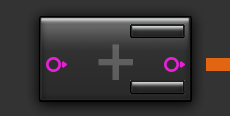
<style>
.page{position:relative;width:230px;height:116px;background:#333333}
.page>*{position:absolute;margin:0}
.t1{font:67px "MyriadPro-Bold";color:#5f5f5f}
</style>
<div class="page">
<p class="t1" style="left:98px;top:44px;width:35px;height:36px">+</p>
</div>
